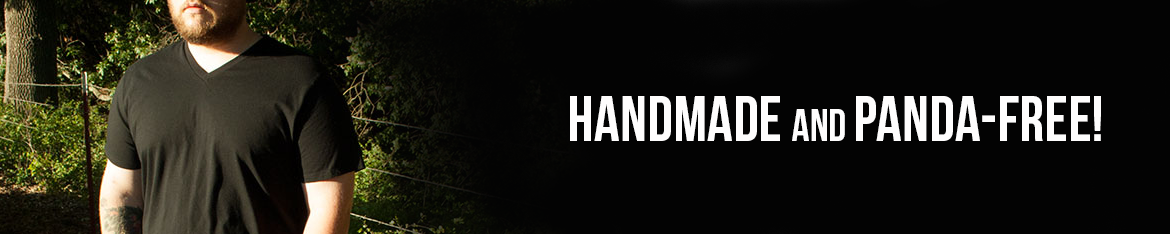
<style>
.page{position:relative;width:1170px;height:234px;background:#030303}
.page>*{position:absolute;margin:0}
.t1{font:64.1px "BebasNeue";color:#fefdfd}
.t2{font:44.6px "BebasNeue";color:#fefdfd}
</style>
<div class="page">
<p class="t1" style="left:570px;top:96px;width:531px;height:45px">Handmade <span class="t2">and </span>panda-free!</p>
</div>
